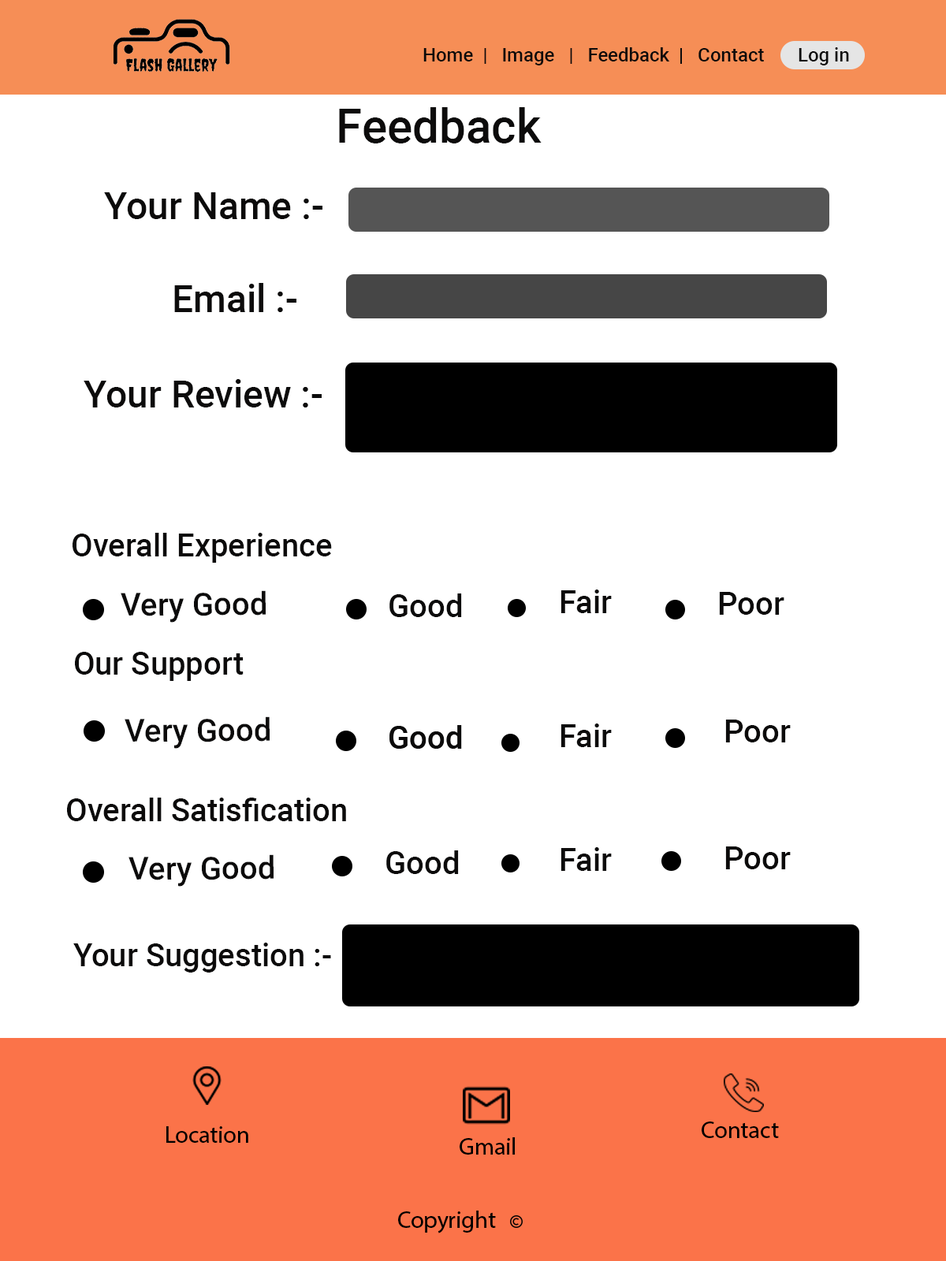
<style>
.page{position:relative;width:946px;height:1261px;background:#ffffff}
.page>*{position:absolute;margin:0}
.t1{font:18.9px "Roboto-Medium";color:#0c0b0b}
.t2{font:47.3px "Roboto-Medium";color:#0c0b0b}
.t3{font:37.8px "Roboto-Medium";color:#0c0b0b}
.t4{font:31.5px "Roboto-Medium";color:#0c0b0b}
.t5{font:23.6px "MyriadHebrew-Regular";color:#000000}
.t6{font:23.8px "MyriadHebrew-Regular";color:#000000}
</style>
<div class="page">
<p class="t1" style="left:423px;top:47px;width:341px;height:18px">Home  |   Image   |   Feedback  |   Contact</p>
<p class="t1" style="left:798px;top:47px;width:51px;height:18px">Log in</p>
<p class="t2" style="left:339px;top:107px;width:202px;height:36px">Feedback</p>
<p class="t3" style="left:104px;top:192px;width:218px;height:27px">Your Name :-</p>
<p class="t3" style="left:174px;top:283px;width:122px;height:29px">Email :-</p>
<p class="t3" style="left:84px;top:379px;width:238px;height:28px">Your Review :-</p>
<p class="t4" style="left:73px;top:533px;width:259px;height:30px">Overall Experience</p>
<p class="t4" style="left:121px;top:590px;width:145px;height:33px;rotate:-1deg">Very Good</p>
<p class="t4" style="left:389px;top:593px;width:73px;height:24px">Good</p>
<p class="t4" style="left:560px;top:589px;width:52px;height:24px">Fair</p>
<p class="t4" style="left:719px;top:592px;width:65px;height:23px">Poor</p>
<p class="t4" style="left:75px;top:652px;width:169px;height:29px">Our Support</p>
<p class="t4" style="left:125px;top:716px;width:145px;height:33px;rotate:-1deg">Very Good</p>
<p class="t4" style="left:389px;top:725px;width:73px;height:24px">Good</p>
<p class="t4" style="left:389px;top:725px;width:73px;height:24px">Good</p>
<p class="t4" style="left:560px;top:723px;width:52px;height:24px">Fair</p>
<p class="t4" style="left:725px;top:720px;width:65px;height:22px">Poor</p>
<p class="t4" style="left:67px;top:798px;width:279px;height:23px">Overall Satisfication</p>
<p class="t4" style="left:128px;top:854px;width:145px;height:33px;rotate:-1deg">Very Good</p>
<p class="t4" style="left:386px;top:850px;width:73px;height:24px">Good</p>
<p class="t4" style="left:560px;top:847px;width:52px;height:24px">Fair</p>
<p class="t4" style="left:725px;top:846px;width:65px;height:23px">Poor</p>
<p class="t4" style="left:73px;top:943px;width:258px;height:29px">Your Suggestion :-</p>
<p class="t5" style="left:701px;top:1121px;width:78px;height:17px">Contact</p>
<p class="t5" style="left:166px;top:1126px;width:82px;height:17px">Location</p>
<p class="t5" style="left:459px;top:1137px;width:56px;height:18px">Gmail</p>
<p class="t6" style="left:398px;top:1210px;width:98px;height:23px">Copyright</p>
</div>
